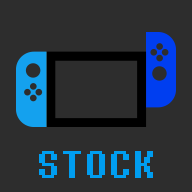
<style>
.page{position:relative;width:192px;height:192px;background:#2d2d2d}
.page>*{position:absolute;margin:0}
.t1{font:36px "BIG-SHOT";color:#009df0}
</style>
<div class="page">
<p class="t1" style="left:39px;top:151px;width:114px;height:27px">STOCK</p>
</div>
